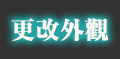
<style>
.page{position:relative;width:120px;height:59px;background:#333333}
.page>*{position:absolute;margin:0}
.t1{font:24px "RyuminPr6N-ExBold";color:#fbf8f3;font-weight:bold}
</style>
<div class="page">
<p class="t1" style="left:11px;top:18px;width:98px;height:23px">更改外觀</p>
</div>
